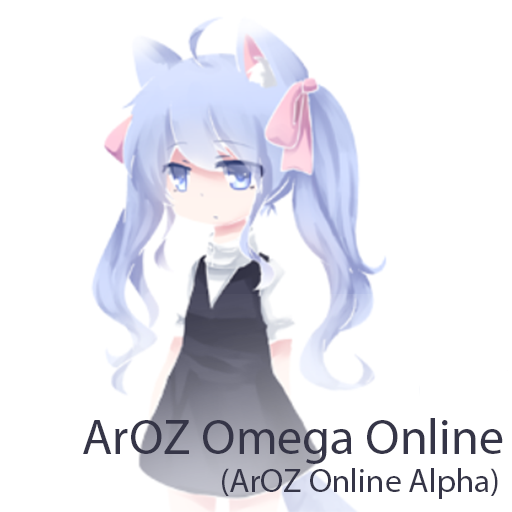
<style>
.page{position:relative;width:512px;height:512px;background:#ffffff}
.page>*{position:absolute;margin:0}
.t1{font:50px "MyriadPro-Regular";color:#353547}
.t2{font:33.3px "MyriadPro-Regular";color:#353547}
</style>
<div class="page">
<p class="t1" style="left:83px;top:418px;width:420px;height:46px">ArOZ Omega Online</p>
<p class="t2" style="left:222px;top:468px;width:276px;height:31px">(ArOZ Online Alpha)</p>
</div>
